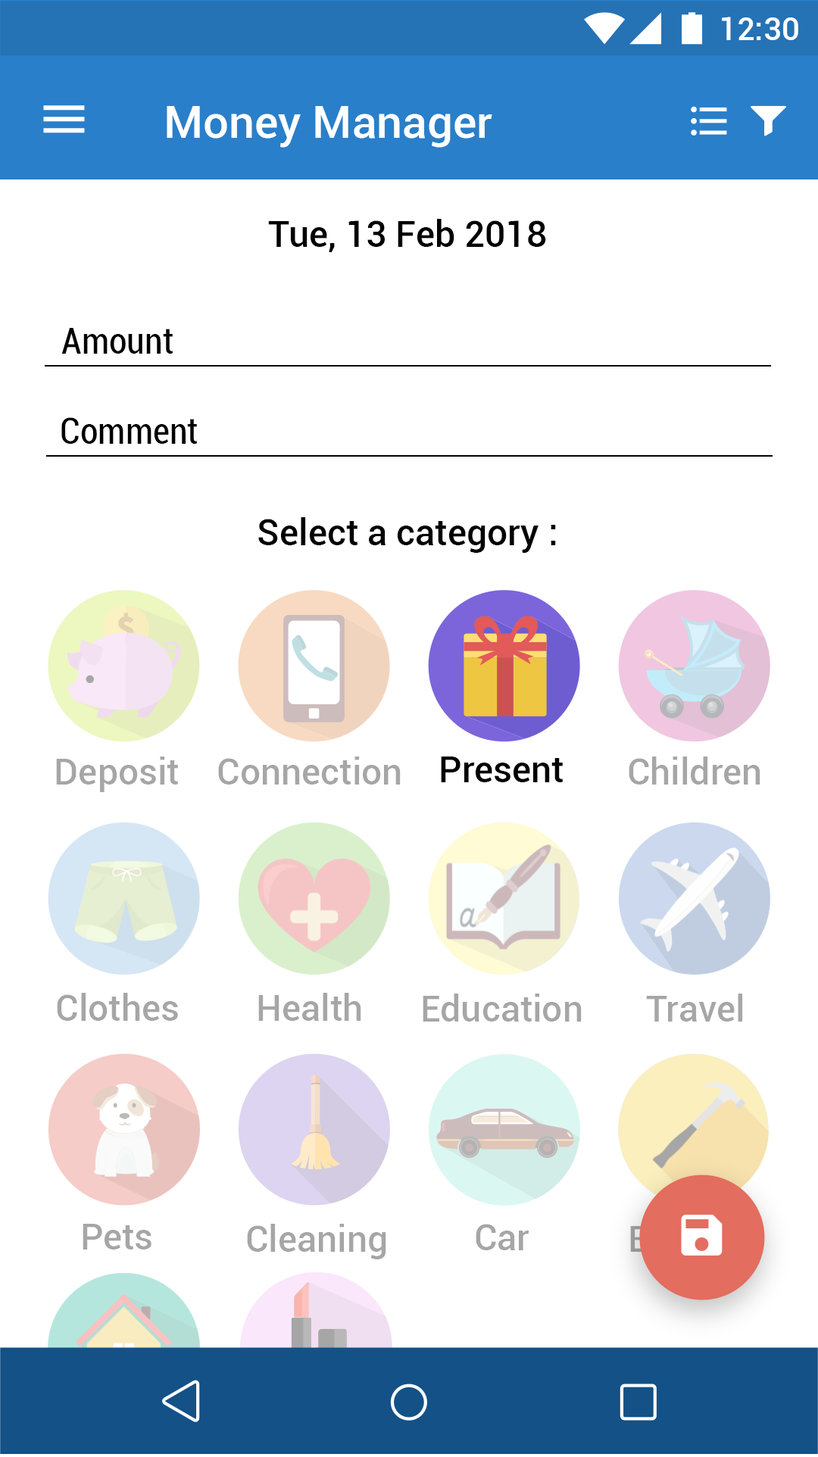
<style>
.page{position:relative;width:818px;height:1457px;background:#ffffff}
.page>*{position:absolute;margin:0}
.t1{font:31.8px "Roboto-Medium";color:#ffffff}
.t2{font:45.4px "Roboto-Medium";color:#ffffff}
.t3{font:36.4px "Roboto-Medium";color:#000000}
.t4{font:36.4px "Roboto-Condensed";color:#000000}
.t5{font:36.4px "Roboto-Medium";color:#a6a6a6}
</style>
<div class="page">
<p class="t1" style="left:722px;top:17px;width:76px;height:23px">12:30</p>
<p class="t2" style="left:167px;top:106px;width:325px;height:42px">Money Manager</p>
<p class="t3" style="left:268px;top:219px;width:278px;height:33px">Тue, 13 Feb 2018</p>
<p class="t4" style="left:61px;top:328px;width:112px;height:26px">Amount</p>
<p class="t4" style="left:61px;top:417px;width:137px;height:27px">Comment</p>
<p class="t3" style="left:258px;top:517px;width:298px;height:36px">Select a category :</p>
<p class="t5" style="left:56px;top:757px;width:123px;height:35px">Deposit</p>
<p class="t5" style="left:218px;top:757px;width:183px;height:28px">Connection</p>
<p class="t3" style="left:441px;top:757px;width:123px;height:26px">Present</p>
<p class="t5" style="left:629px;top:757px;width:132px;height:28px">Children</p>
<p class="t5" style="left:57px;top:993px;width:121px;height:28px">Clothes</p>
<p class="t5" style="left:258px;top:993px;width:103px;height:28px">Health</p>
<p class="t5" style="left:423px;top:994px;width:159px;height:28px">Education</p>
<p class="t5" style="left:646px;top:994px;width:97px;height:28px">Travel</p>
<p class="t5" style="left:83px;top:1224px;width:69px;height:26px">Pets</p>
<p class="t5" style="left:247px;top:1224px;width:139px;height:36px">Cleaning</p>
<p class="t5" style="left:476px;top:1224px;width:54px;height:27px">Car</p>
</div>
